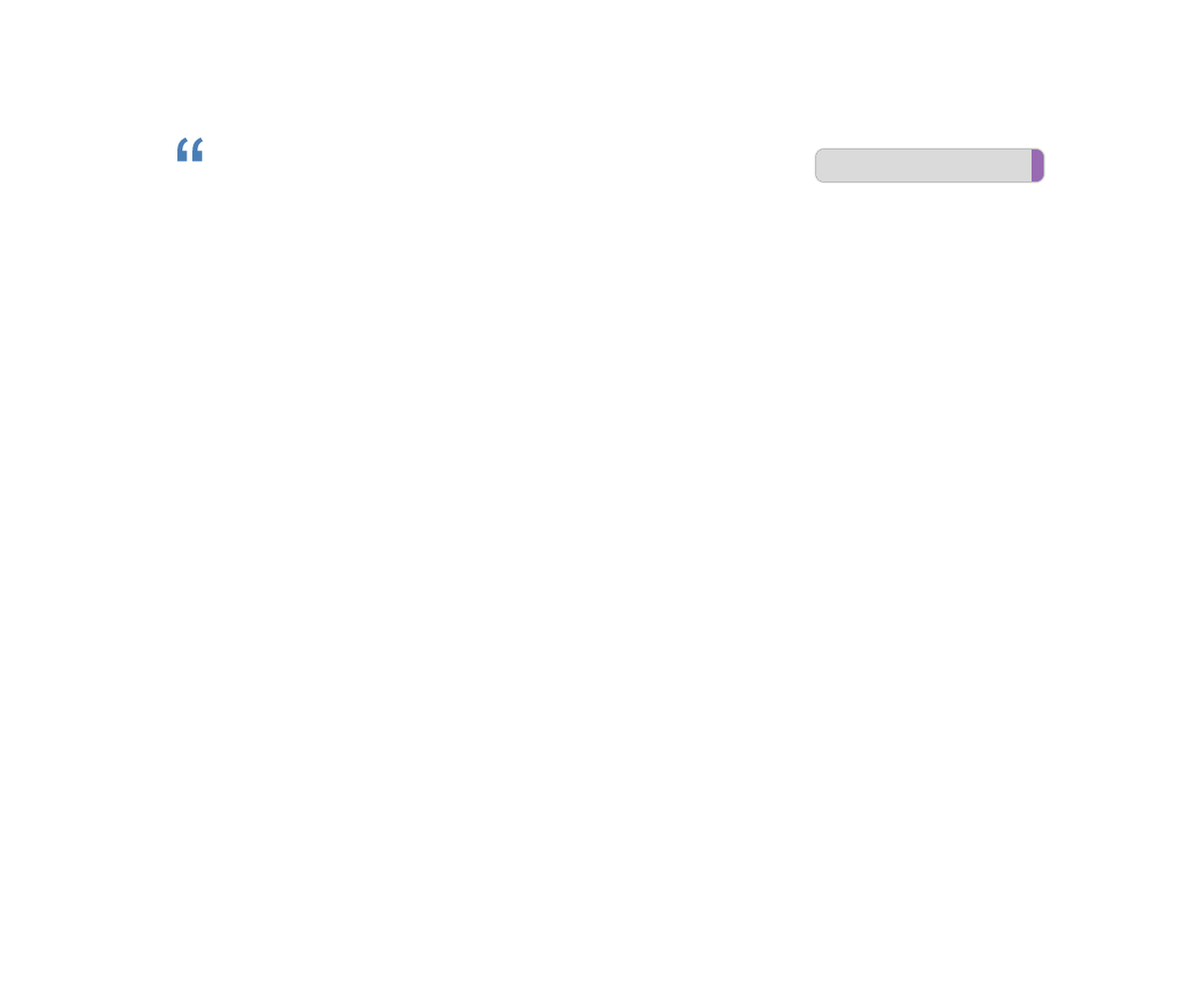
<style>
.page{position:relative;width:1196px;height:997px;background:#ffffff}
.page>*{position:absolute;margin:0}
.t1{font:99.7px "ArialMT";color:#497eb5}
</style>
<div class="page">
<p class="t1" style="left:177px;top:138px;width:26px;height:23px">“</p>
</div>
